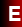
<style>
.page{position:relative;width:22px;height:27px}
.page>*{position:absolute;margin:0}
.t1{font:20px "Helvetica-Bold";letter-spacing:-0.05em;color:#ffffff}
</style>
<div class="page">
<p class="t1" style="left:9px;top:6px;width:12px;height:15px">E</p>
</div>
